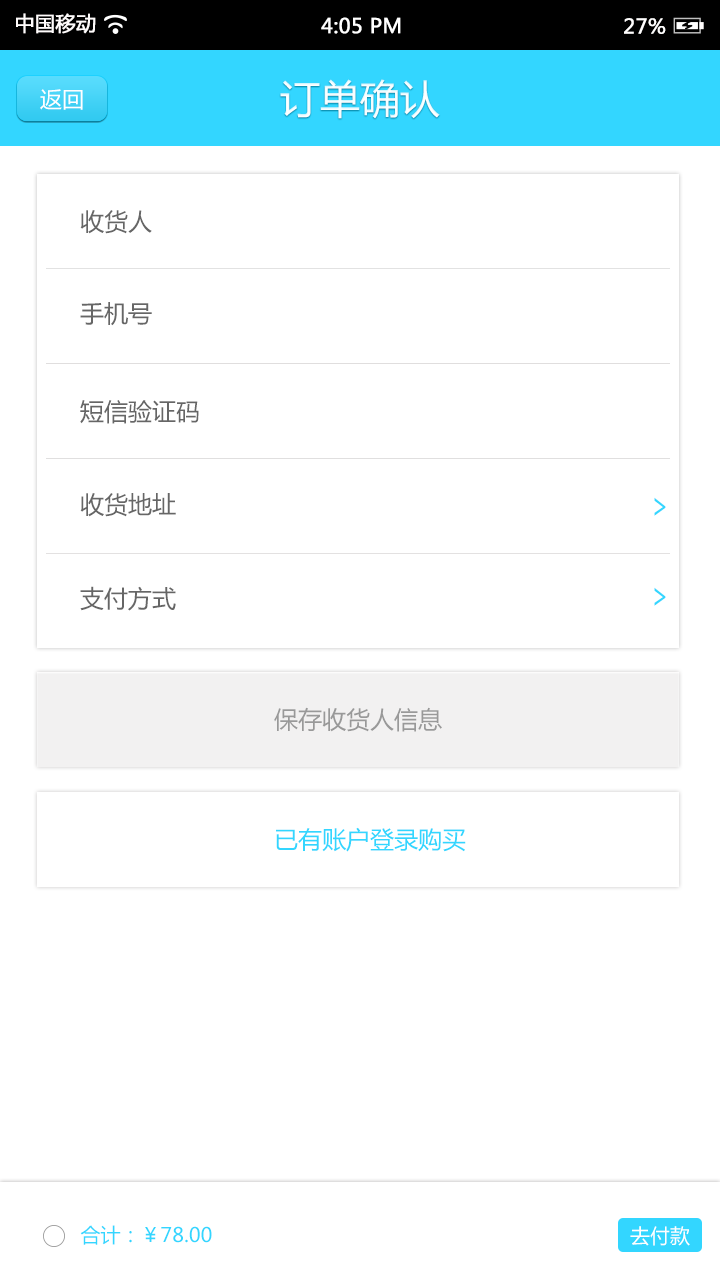
<style>
.page{position:relative;width:720px;height:1280px;background:#ffffff}
.page>*{position:absolute;margin:0}
.t1{font:20px "MicrosoftYaHei";color:#fffcfc;font-weight:bold}
.t2{font:20px "MicrosoftYaHei";color:#ffffff;font-weight:bold}
.t3{font:20px "MicrosoftYaHei";color:#fffefe;font-weight:bold}
.t4{font:22px "MicrosoftYaHei";color:#ffffff}
.t5{font:40px "MicrosoftYaHei";color:#ffffff}
.t6{font:24px "MicrosoftYaHei";color:#666666}
.t7{font:35px "MicrosoftYaHei";color:#33d6ff;scale:0.69 1}
.t8{font:24px "MicrosoftYaHei";color:#999999}
.t9{font:24px "MicrosoftYaHei";color:#33d6ff}
.t10{font:20px "MicrosoftYaHei";color:#33d6ff}
.t11{font:20px "MicrosoftYaHei";color:#ffffff}
</style>
<div class="page">
<p class="t1" style="left:16px;top:13px;width:80px;height:21px">中国移动</p>
<p class="t2" style="left:321px;top:17px;width:80px;height:17px">4:05 PM</p>
<p class="t3" style="left:624px;top:18px;width:42px;height:16px">27%</p>
<p class="t4" style="left:40px;top:89px;width:43px;height:21px">返回</p>
<p class="t5" style="left:280px;top:79px;width:160px;height:40px">订单确认</p>
<p class="t6" style="left:80px;top:210px;width:72px;height:24px">收货人</p>
<p class="t6" style="left:80px;top:302px;width:72px;height:24px">手机号</p>
<p class="t6" style="left:80px;top:400px;width:119px;height:24px">短信验证码</p>
<p class="t6" style="left:80px;top:493px;width:96px;height:24px">收货地址</p>
<p class="t7" style="left:654px;top:497px;width:12px;height:19px">&gt;</p>
<p class="t6" style="left:80px;top:586px;width:96px;height:25px">支付方式</p>
<p class="t7" style="left:654px;top:587px;width:12px;height:19px">&gt;</p>
<p class="t8" style="left:274px;top:707px;width:168px;height:25px">保存收货人信息</p>
<p class="t9" style="left:276px;top:827px;width:190px;height:25px">已有账户登录购买</p>
<p class="t10" style="left:80px;top:1225px;width:132px;height:20px">合计：￥78.00</p>
<p class="t11" style="left:630px;top:1226px;width:60px;height:20px">去付款</p>
</div>
